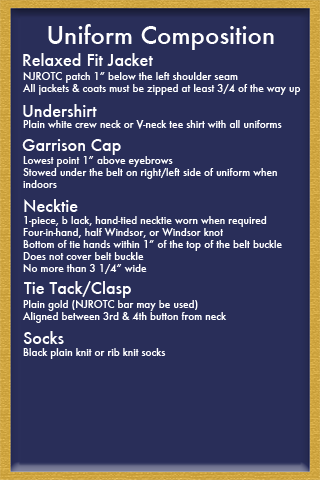
<style>
.page{position:relative;width:320px;height:480px;background:#292e59}
.page>*{position:absolute;margin:0}
.t1{font:24px "Futura-Medium";color:#ffffff}
.t2{font:16px "Futura-Medium";color:#ffffff}
.t3{font:10px "Futura-Medium";color:#ffffff}
</style>
<div class="page">
<p class="t1" style="left:48px;top:24px;width:226px;height:26px">Uniform Composition</p>
<p class="t2" style="left:23px;top:53px;width:130px;height:13px">Relaxed Fit Jacket</p>
<p class="t3" style="left:22px;top:72px;width:279px;height:287px">NJROTC patch 1” below the left shoulder seam<br>All jackets &amp; coats must be zipped at least 3/4 of the way up<br><br><br>Plain white crew neck or V-neck tee shirt with all uniforms<br><br><br>Lowest point 1” above eyebrows<br>Stowed under the belt on right/left side of uniform when <br>indoors<br><br><br>1-piece, b lack, hand-tied necktie worn when required<br>Four-in-hand, half Windsor, or Windsor knot<br>Bottom of tie hands within 1” of the top of the belt buckle<br>Does not cover belt buckle<br>No more than 3 1/4” wide<br><br><br>Plain gold (NJROTC bar may be used)<br>Aligned between 3rd &amp; 4th button from neck<br><br><br>Black plain knit or rib knit socks</p>
<p class="t2" style="left:23px;top:104px;width:74px;height:13px">Undershirt</p>
<p class="t2" style="left:22px;top:139px;width:99px;height:16px">Garrison Cap</p>
<p class="t2" style="left:24px;top:199px;width:54px;height:13px">Necktie</p>
<p class="t2" style="left:24px;top:281px;width:107px;height:17px">Tie Tack/Clasp</p>
<p class="t2" style="left:23px;top:331px;width:41px;height:13px">Socks</p>
</div>
